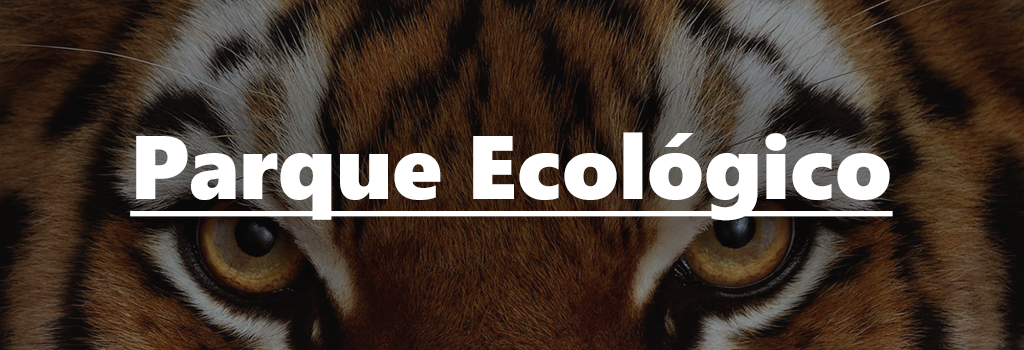
<style>
.page{position:relative;width:1024px;height:350px}
.page>*{position:absolute;margin:0}
.t1{font:90px "SegoeUIBlack";color:#ffffff;text-decoration:underline}
</style>
<div class="page">
<p class="t1" style="left:130px;top:132px;width:763px;height:89px">Parque Ecológico</p>
</div>
